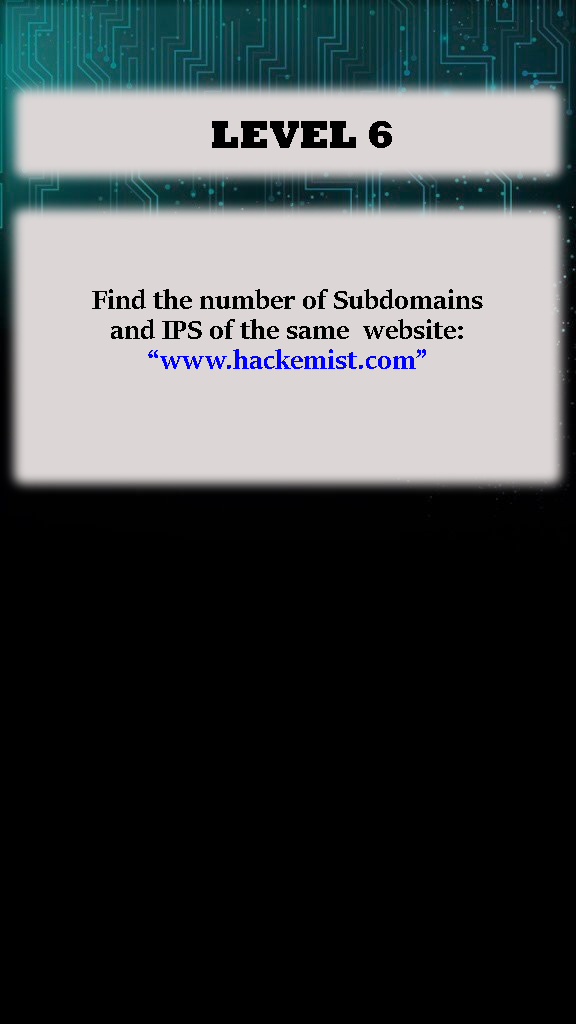
<style>
.page{position:relative;width:576px;height:1024px;background:#000000}
.page>*{position:absolute;margin:0}
.t1{font:40px "Rockwell-ExtraBold";color:#000000}
.t2{font:30px/10px "SitkaBanner-Bold";color:#000000}
.t3{font:30px/10px "SitkaBanner-Bold";color:#0000ff}
</style>
<div class="page">
<p class="t1" style="left:212px;top:121px;width:180px;height:27px">LEVEL 6</p>
<p class="t2" style="left:92px;top:289px;width:391px;height:80px;text-align:center">Find the number of Subdomains <br><br><br>and IPS of the same  website:<br> <br><span class="t3"><br>“www.hackemist.com”</span></p>
</div>
